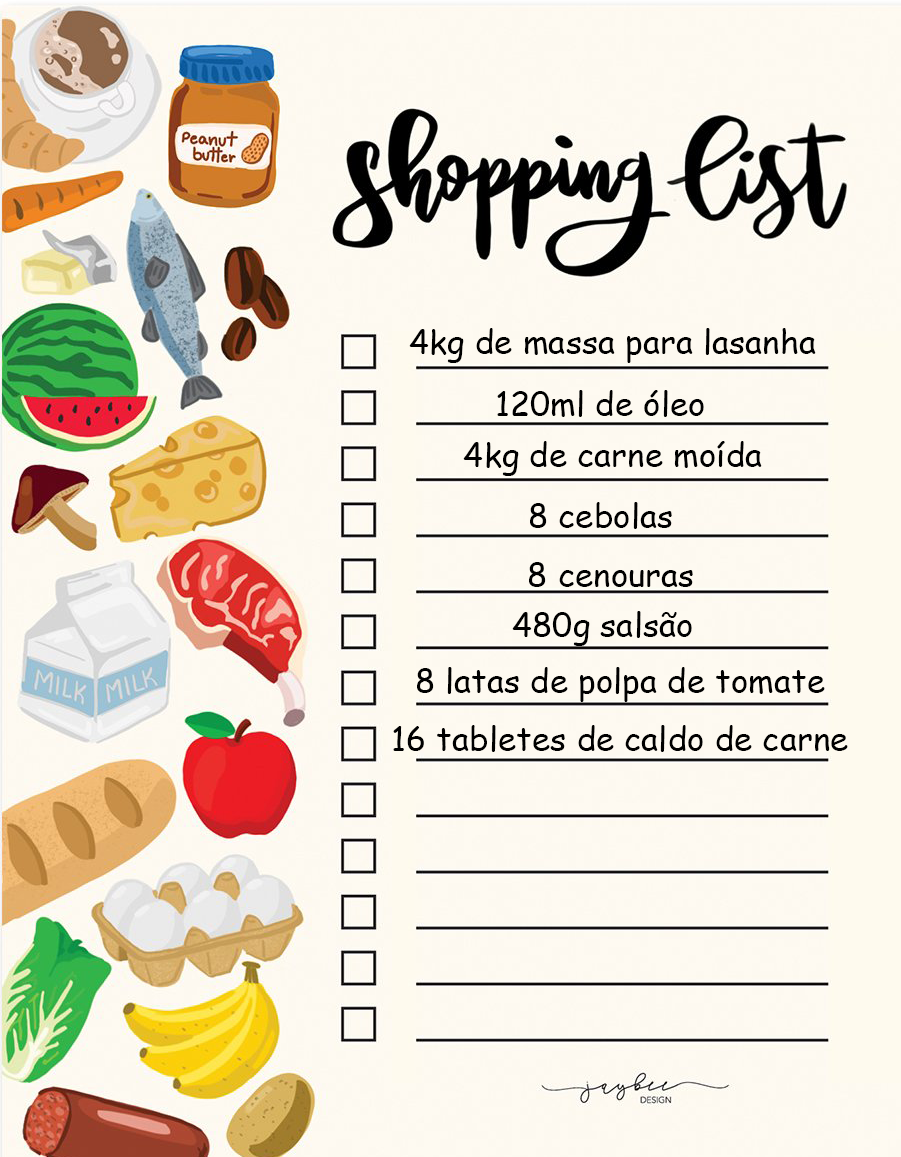
<style>
.page{position:relative;width:901px;height:1157px;background:#fefaf1}
.page>*{position:absolute;margin:0}
.t1{font:33.3px "ComicSansMS";color:#000000}
</style>
<div class="page">
<p class="t1" style="left:409px;top:328px;width:407px;height:35px">4kg de massa para lasanha</p>
<p class="t1" style="left:497px;top:390px;width:207px;height:27px">120ml de óleo</p>
<p class="t1" style="left:463px;top:441px;width:299px;height:35px">4kg de carne moída</p>
<p class="t1" style="left:530px;top:502px;width:142px;height:27px">8 cebolas</p>
<p class="t1" style="left:529px;top:562px;width:164px;height:25px">8 cenouras</p>
<p class="t1" style="left:512px;top:611px;width:180px;height:35px">480g salsão</p>
<p class="t1" style="left:417px;top:667px;width:408px;height:35px">8 latas de polpa de tomate</p>
<p class="t1" style="left:393px;top:725px;width:455px;height:27px">16 tabletes de caldo de carne</p>
</div>
